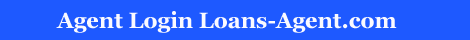
<style>
.page{position:relative;width:470px;height:40px;background:#1e59ff}
.page>*{position:absolute;margin:0}
.t1{font:22px "Georgia-Bold";color:#fbfaff}
</style>
<div class="page">
<p class="t1" style="left:56px;top:11px;width:341px;height:22px">Agent Login Loans-Agent.com</p>
</div>
